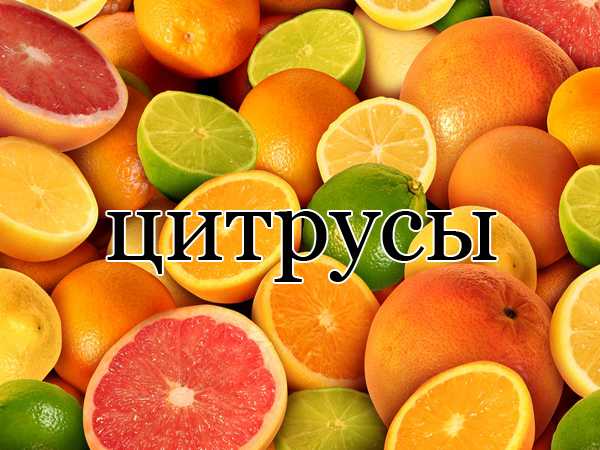
<style>
.page{position:relative;width:600px;height:450px}
.page>*{position:absolute;margin:0}
.t1{font:100px "Georgia";color:#000000}
</style>
<div class="page">
<p class="t1" style="left:107px;top:211px;width:390px;height:71px">цитрусы</p>
</div>
